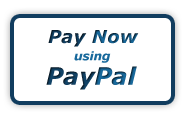
<style>
.page{position:relative;width:186px;height:117px;background:#ffffff}
.page>*{position:absolute;margin:0}
.t1{font:18px "Verdana-BoldItalic";letter-spacing:0.01em;color:#124367}
.t2{font:18px "Verdana-BoldItalic";letter-spacing:0.01em;color:#18699c}
.t3{font:12px "Verdana-BoldItalic";letter-spacing:-0.01em;color:#18699c}
.t4{font:24px "Verdana-BoldItalic";letter-spacing:-0.01em;color:#124367}
.t5{font:24px "Verdana-BoldItalic";letter-spacing:-0.01em;color:#18699c}
</style>
<div class="page">
<p class="t1" style="left:48px;top:30px;width:91px;height:17px">Pay <span class="t2">Now</span></p>
<p class="t3" style="left:74px;top:51px;width:37px;height:12px">using</p>
<p class="t4" style="left:46px;top:66px;width:91px;height:24px">Pay<span class="t5">Pal</span></p>
</div>
